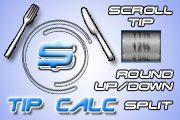
<style>
.page{position:relative;width:180px;height:120px}
.page>*{position:absolute;margin:0}
.t1{font:10px "TerminatorRealNFI";letter-spacing:-0.01em;color:#ffffff;font-style:italic}
.t2{font:30.9px "TerminatorRealNFI";letter-spacing:0.05em;font-style:italic}
.t3{font:20px "TerminatorTwo";font-weight:bold;font-style:italic}
</style>
<div class="page">
<p class="t1" style="left:108px;top:6px;width:64px;height:21px;text-align:center">Scroll<br>Tip</p>
<p class="t2" style="left:37px;top:41px;width:37px;height:27px">$</p>
<p class="t1" style="left:94px;top:70px;width:80px;height:21px;text-align:right">Round<br>Up/Down</p>
<p class="t3" style="left:8px;top:98px;width:109px;height:14px">Tip Calc</p>
<p class="t1" style="left:124px;top:101px;width:49px;height:9px">Split</p>
</div>
